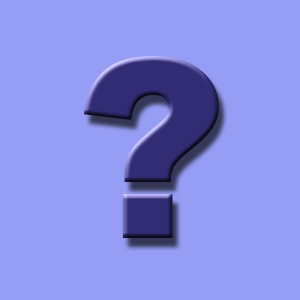
<style>
.page{position:relative;width:300px;height:300px;background:#969df4}
.page>*{position:absolute;margin:0}
.t1{font:250px "Arial-Black";color:#312c73}
</style>
<div class="page">
<p class="t1" style="left:83px;top:56px;width:136px;height:182px">?</p>
</div>
